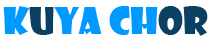
<style>
.page{position:relative;width:208px;height:42px;background:#ffffff}
.page>*{position:absolute;margin:0}
.t1{font:36.2px "ShowcardGothic-Reg";color:#0099ff}
.t2{font:36.2px "ShowcardGothic-Reg";color:#0b4063}
</style>
<div class="page">
<p class="t1" style="left:3px;top:6px;width:205px;height:30px">K<span class="t2">u</span>ya Ch<span class="t2">or</span></p>
</div>
